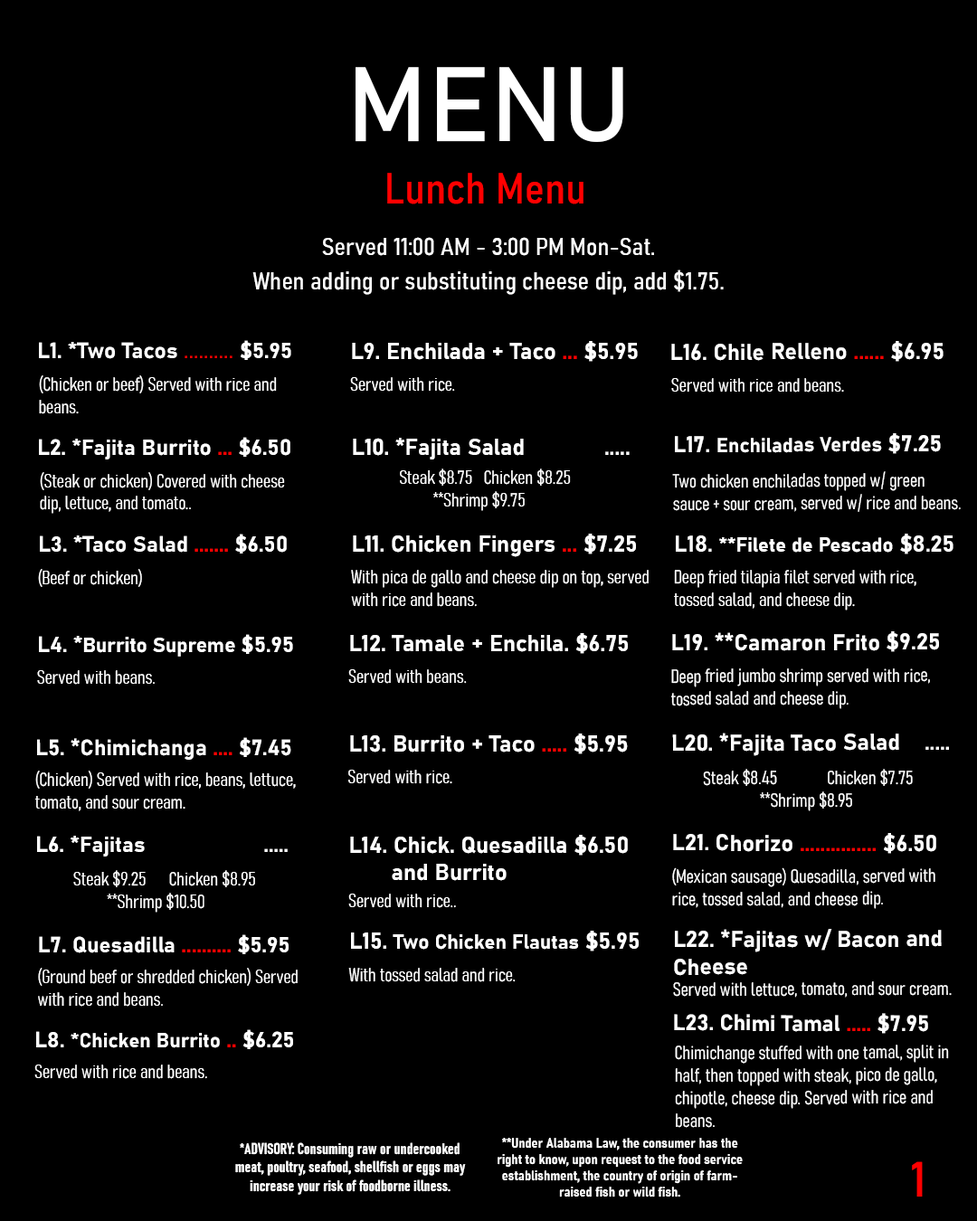
<style>
.page{position:relative;width:977px;height:1221px;background:#000000}
.page>*{position:absolute;margin:0}
.t1{font:104.2px "Bahnschrift";color:#ffffff}
.t2{font:42.9px "Bahnschrift-SemiCondensed";color:#ff0000}
.t3{font:24.2px "Bahnschrift-SemiCondensed";color:#ffffff}
.t4{font:22px "Bahnschrift-Bold";color:#ffffff}
.t5{font:22px "Bahnschrift";color:#ff0000}
.t6{font:22.8px "Bahnschrift-Bold";color:#ffffff}
.t7{font:22.8px "Bahnschrift-Bold";color:#ff0000}
.t8{font:22.7px "Bahnschrift-Bold";color:#ffffff}
.t9{font:22.7px "Bahnschrift-Bold";color:#ff0000}
.t10{font:18.8px "Bahnschrift-LightCondensed";color:#ffffff}
.t11{font:22px "Bahnschrift-Bold";color:#ff0000}
.t12{font:20.1px "Bahnschrift-Bold";color:#ffffff}
.t13{font:20px "Bahnschrift-Bold";color:#ffffff}
.t14{font:20.3px "Bahnschrift-Bold";color:#ffffff}
.t15{font:22.1px "Bahnschrift-Bold";color:#ffffff}
.t16{font:22.1px "Bahnschrift-Bold";color:#ff0000}
.t17{font:20.2px "Bahnschrift-Bold";color:#ffffff}
.t18{font:15.6px "Bahnschrift-BoldCondensed";color:#ffffff}
.t19{font:13.6px "Bahnschrift-BoldSemiCondensed";color:#ffffff}
.t20{font:48.9px "Bahnschrift";color:#ff0000}
</style>
<div class="page">
<p class="t1" style="left:355px;top:67px;width:268px;height:75px">MENU</p>
<p class="t2" style="left:387px;top:173px;width:196px;height:31px">Lunch Menu</p>
<p class="t3" style="left:322px;top:237px;width:332px;height:19px">Served 11:00 AM - 3:00 PM Mon-Sat.</p>
<p class="t3" style="left:252px;top:269px;width:471px;height:26px">When adding or substituting cheese dip, add $1.75.</p>
<p class="t4" style="left:39px;top:340px;width:252px;height:20px">L1. *Two Tacos <span class="t5">.......... </span>$5.95</p>
<p class="t6" style="left:352px;top:341px;width:286px;height:21px">L9. Enchilada + Taco <span class="t7">...</span> $5.95</p>
<p class="t8" style="left:671px;top:341px;width:272px;height:21px">L16. Chile Relleno <span class="t9">......</span> $6.95</p>
<p class="t10" style="left:39px;top:375px;width:238px;height:39px">(Chicken or beef) Served with rice and <br>beans.</p>
<p class="t10" style="left:350px;top:377px;width:105px;height:15px">Served with rice.</p>
<p class="t10" style="left:671px;top:378px;width:173px;height:14px">Served with rice and beans.</p>
<p class="t4" style="left:39px;top:437px;width:251px;height:22px">L2. *Fajita Burrito <span class="t11">...</span> $6.50</p>
<p class="t6" style="left:353px;top:438px;width:276px;height:21px">L10. *Fajita Salad             .....</p>
<p class="t12" style="left:675px;top:433px;width:266px;height:21px"><span class="t8">L17. </span>Enchiladas Verdes <span class="t8">$7.25</span></p>
<p class="t10" style="left:40px;top:472px;width:245px;height:42px">(Steak or chicken) Covered with cheese<br>dip, lettuce, and tomato..</p>
<p class="t10" style="left:400px;top:468px;width:171px;height:43px">Steak $8.75   Chicken $8.25<br>         **Shrimp $9.75</p>
<p class="t10" style="left:672px;top:471px;width:288px;height:41px">Two chicken enchiladas topped w/ green<br>sauce + sour cream, served w/ rice and beans.</p>
<p class="t4" style="left:40px;top:534px;width:247px;height:19px">L3. *Taco Salad <span class="t11">.......</span> $6.50</p>
<p class="t6" style="left:353px;top:534px;width:283px;height:23px">L11. Chicken Fingers <span class="t7">...</span> $7.25</p>
<p class="t13" style="left:676px;top:534px;width:277px;height:20px"><span class="t8">L18. </span>**Filete de Pescado <span class="t8">$8.25</span></p>
<p class="t10" style="left:38px;top:569px;width:104px;height:18px">(Beef or chicken)</p>
<p class="t10" style="left:351px;top:570px;width:297px;height:37px">With pica de gallo and cheese dip on top, served<br>with rice and beans.</p>
<p class="t10" style="left:674px;top:570px;width:242px;height:40px">Deep fried tilapia filet served with rice, <br>tossed salad, and cheese dip.</p>
<p class="t14" style="left:39px;top:634px;width:254px;height:23px"><span class="t4">L4. *</span>Burrito Supreme<span class="t4"> $5.95</span></p>
<p class="t6" style="left:350px;top:633px;width:278px;height:21px">L12. Tamale + Enchila. $6.75</p>
<p class="t8" style="left:672px;top:631px;width:267px;height:21px">L19. **Camaron Frito $9.25</p>
<p class="t10" style="left:37px;top:670px;width:118px;height:15px">Served with beans.</p>
<p class="t10" style="left:348px;top:669px;width:119px;height:15px">Served with beans.</p>
<p class="t10" style="left:671px;top:668px;width:259px;height:41px">Deep fried jumbo shrimp served with rice,<br>tossed salad and cheese dip.</p>
<p class="t4" style="left:37px;top:737px;width:254px;height:23px">L5. *Chimichanga <span class="t11">....</span> $7.45</p>
<p class="t6" style="left:350px;top:733px;width:278px;height:21px">L13. Burrito + Taco <span class="t7">.....</span> $5.95</p>
<p class="t8" style="left:672px;top:733px;width:277px;height:23px">L20. *Fajita Taco Salad    .....</p>
<p class="t10" style="left:34px;top:771px;width:262px;height:40px">(Chicken) Served with rice, beans, lettuce,<br>tomato, and sour cream.</p>
<p class="t10" style="left:348px;top:770px;width:104px;height:14px">Served with rice.</p>
<p class="t10" style="left:703px;top:769px;width:209px;height:42px">Steak $8.45      Chicken $7.75<br>       **Shrimp $8.95</p>
<p class="t9" style="left:673px;top:833px;width:263px;height:21px"><span class="t8">L21. Chorizo </span>...............<span class="t8"> $6.50</span></p>
<p class="t4" style="left:37px;top:836px;width:251px;height:20px">L6. *Fajitas                    .....</p>
<p class="t6" style="left:350px;top:835px;width:278px;height:46px">L14. Chick. Quesadilla $6.50<br>       and Burrito</p>
<p class="t10" style="left:73px;top:870px;width:182px;height:42px">Steak $9.25      Chicken $8.95<br>         **Shrimp $10.50</p>
<p class="t10" style="left:672px;top:867px;width:263px;height:42px">(Mexican sausage) Quesadilla, served with<br>rice, tossed salad, and cheese dip.</p>
<p class="t10" style="left:348px;top:894px;width:108px;height:14px">Served with rice..</p>
<p class="t8" style="left:674px;top:929px;width:267px;height:47px">L22. *Fajitas w/ Bacon and <br>Cheese</p>
<p class="t4" style="left:39px;top:934px;width:249px;height:20px">L7. Quesadilla <span class="t11">..........</span> $5.95</p>
<p class="t14" style="left:351px;top:931px;width:287px;height:20px"><span class="t6">L15. </span>Two Chicken Flautas<span class="t6"> $5.95</span></p>
<p class="t10" style="left:38px;top:968px;width:260px;height:39px">(Ground beef or shredded chicken) Served<br>with rice and beans.</p>
<p class="t10" style="left:348px;top:968px;width:167px;height:14px">With tossed salad and rice.</p>
<p class="t10" style="left:673px;top:981px;width:278px;height:17px">Served with lettuce, tomato, and sour cream.</p>
<p class="t15" style="left:674px;top:1013px;width:254px;height:21px">L23. Chimi Tamal <span class="t16">.....</span> $7.95</p>
<p class="t17" style="left:36px;top:1029px;width:257px;height:20px"><span class="t4">L8. </span>*Chicken Burrito <span class="t11">..</span><span class="t4"> $6.25</span></p>
<p class="t10" style="left:675px;top:1045px;width:274px;height:83px">Chimichange stuffed with one tamal, split in<br>half, then topped with steak, pico de gallo,<br>chipotle, cheese dip. Served with rice and <br>beans.</p>
<p class="t10" style="left:34px;top:1064px;width:173px;height:15px">Served with rice and beans.</p>
<p class="t18" style="left:235px;top:1142px;width:231px;height:53px;text-align:center">*ADVISORY: Consuming raw or undercooked<br>meat, poultry, seafood, shellfish or eggs may<br>increase your risk of foodborne illness.</p>
<p class="t19" style="left:497px;top:1138px;width:245px;height:59px;text-align:center">**Under Alabama Law, the consumer has the<br>right to know, upon request to the food service<br>establishment, the country of origin of farm-<br>raised fish or wild fish.</p>
<p class="t20" style="left:912px;top:1161px;width:10px;height:35px">1</p>
</div>
